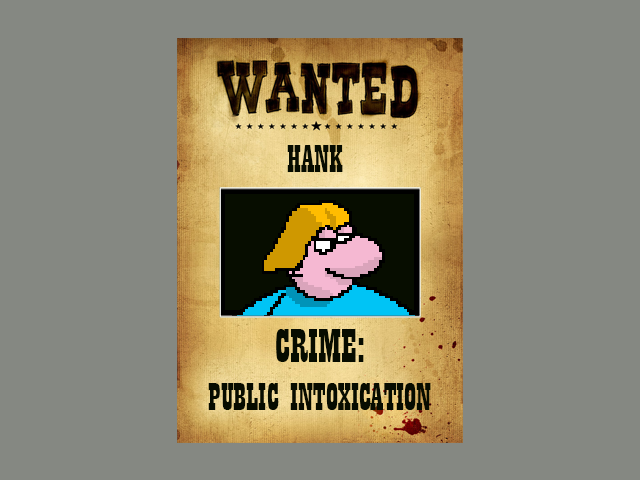
<style>
.page{position:relative;width:640px;height:480px;background:#858882}
.page>*{position:absolute;margin:0}
.t1{font:40px "Playbill";color:#070c00}
.t2{font:50px "Playbill";color:#070c00}
</style>
<div class="page">
<p class="t1" style="left:287px;top:145px;width:56px;height:27px">HANK</p>
<p class="t1" style="left:208px;top:329px;width:223px;height:81px;text-align:center"><span class="t2">CRIME:<br></span>PUBLIC INTOXICATION</p>
</div>
